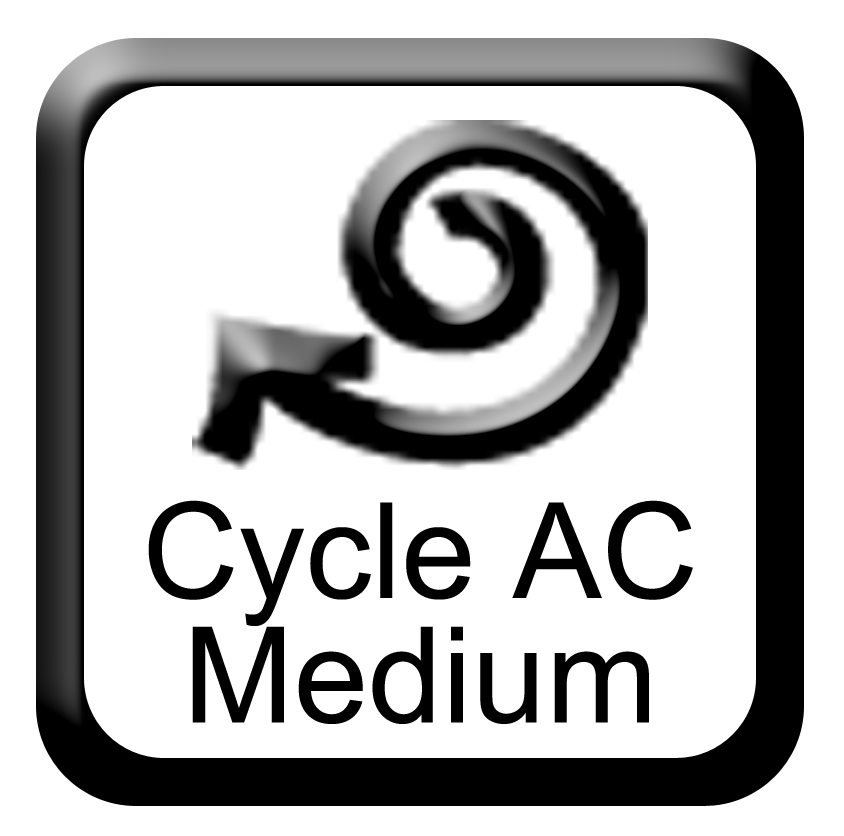
<style>
.page{position:relative;width:844px;height:836px;background:#ffffff}
.page>*{position:absolute;margin:0}
.t1{font:133.3px/124.4px "ArialMT";color:#000000}
</style>
<div class="page">
<p class="t1" style="left:148px;top:500px;width:545px;height:224px;text-align:center">Cycle AC<br>Medium</p>
</div>
